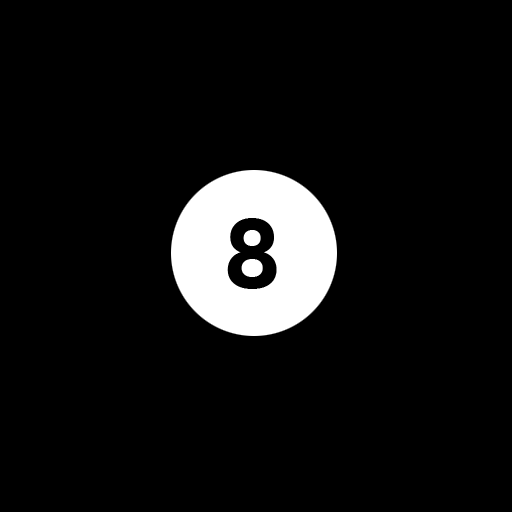
<style>
.page{position:relative;width:512px;height:512px;background:#000000}
.page>*{position:absolute;margin:0}
.t1{font:96px "FuturaBT-Heavy";color:#000000}
</style>
<div class="page">
<p class="t1" style="left:227px;top:218px;width:50px;height:71px">8</p>
</div>
